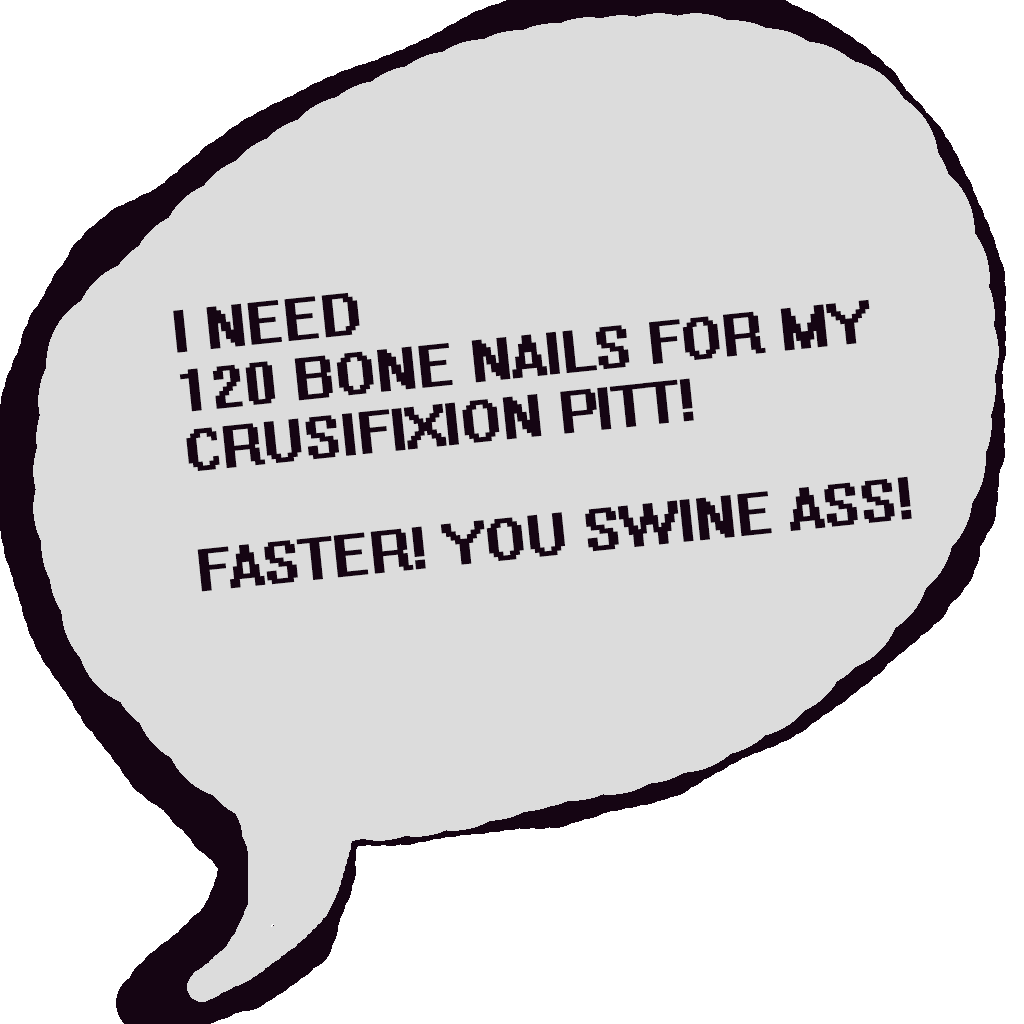
<style>
.page{position:relative;width:1024px;height:1024px;background:#dcdcdc}
.page>*{position:absolute;margin:0}
.t1{font:52.8px/60px "System";color:#150513;font-weight:bold}
</style>
<div class="page">
<p class="t1" style="left:173px;top:292px;width:739px;height:300px;rotate:-6deg">I NEED<br>120 BONE NAILS FOR MY<br>CRUSIFIXION PITT!<br><br>FASTER! YOU SWINE ASS!</p>
</div>
